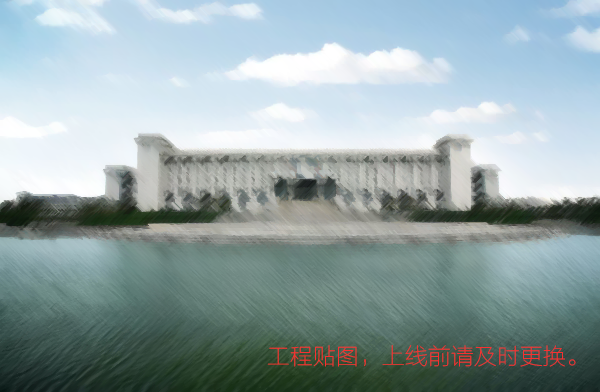
<style>
.page{position:relative;width:600px;height:392px}
.page>*{position:absolute;margin:0}
.t1{font:23px "FZLTCXHJW--GB1-0";color:#fb3030}
</style>
<div class="page">
<p class="t1" style="left:267px;top:345px;width:309px;height:22px">工程贴图，上线前请及时更换。</p>
</div>
